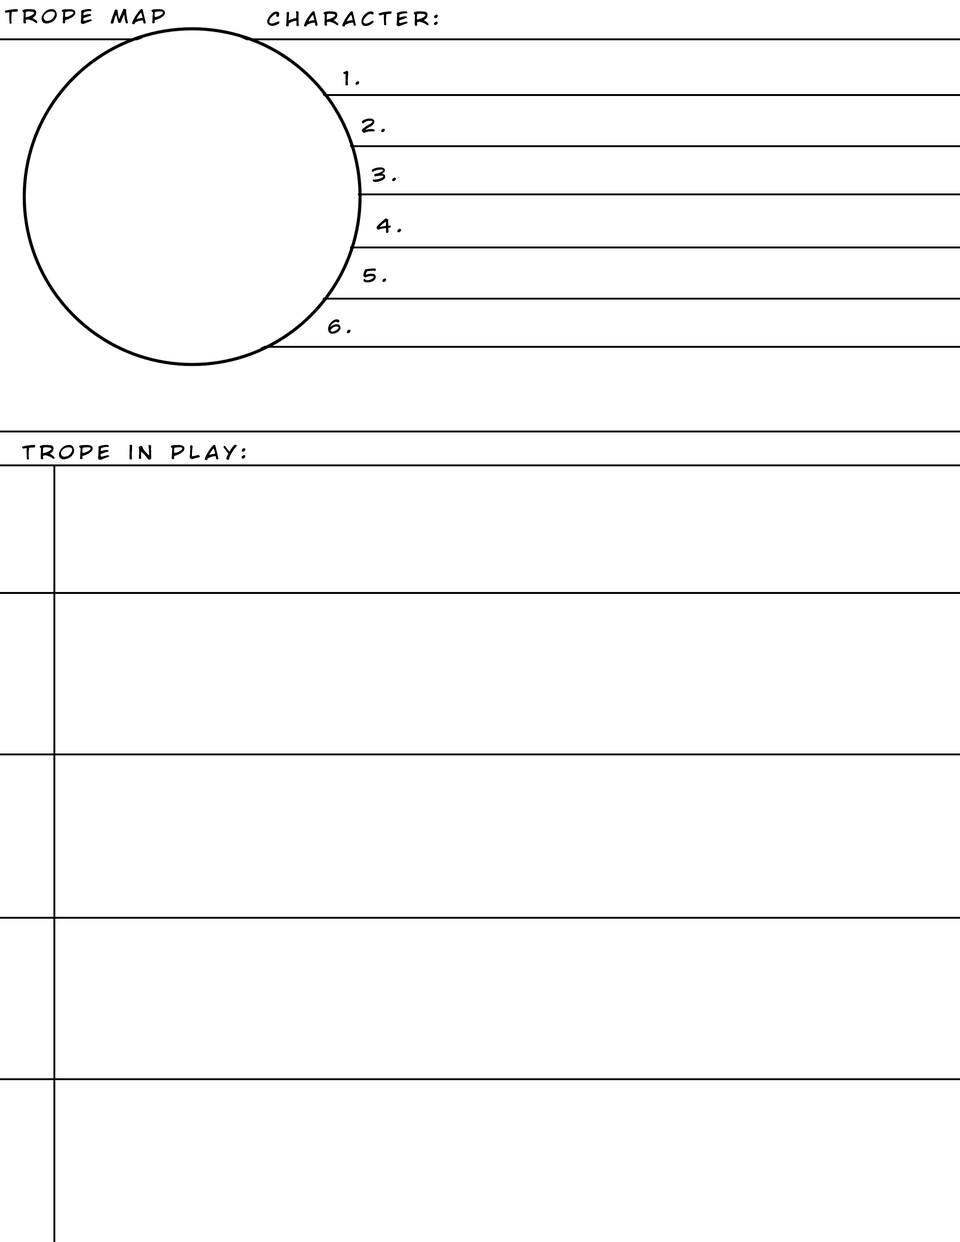
<style>
.page{position:relative;width:960px;height:1242px;background:#ffffff}
.page>*{position:absolute;margin:0}
.t1{font:18.2px "WildWordsRoman";letter-spacing:0.22em;color:#000000;scale:1.17 1}
</style>
<div class="page">
<p class="t1" style="left:5px;top:9px;width:160px;height:15px">Trope map</p>
<p class="t1" style="left:267px;top:11px;width:171px;height:16px">Character:</p>
<p class="t1" style="left:343px;top:71px;width:16px;height:14px">1.</p>
<p class="t1" style="left:362px;top:119px;width:23px;height:14px">2.</p>
<p class="t1" style="left:372px;top:167px;width:24px;height:15px">3.</p>
<p class="t1" style="left:376px;top:218px;width:25px;height:15px">4.</p>
<p class="t1" style="left:363px;top:268px;width:23px;height:15px">5.</p>
<p class="t1" style="left:328px;top:319px;width:22px;height:15px">6.</p>
<p class="t1" style="left:22px;top:445px;width:223px;height:15px">Trope in play:</p>
</div>
